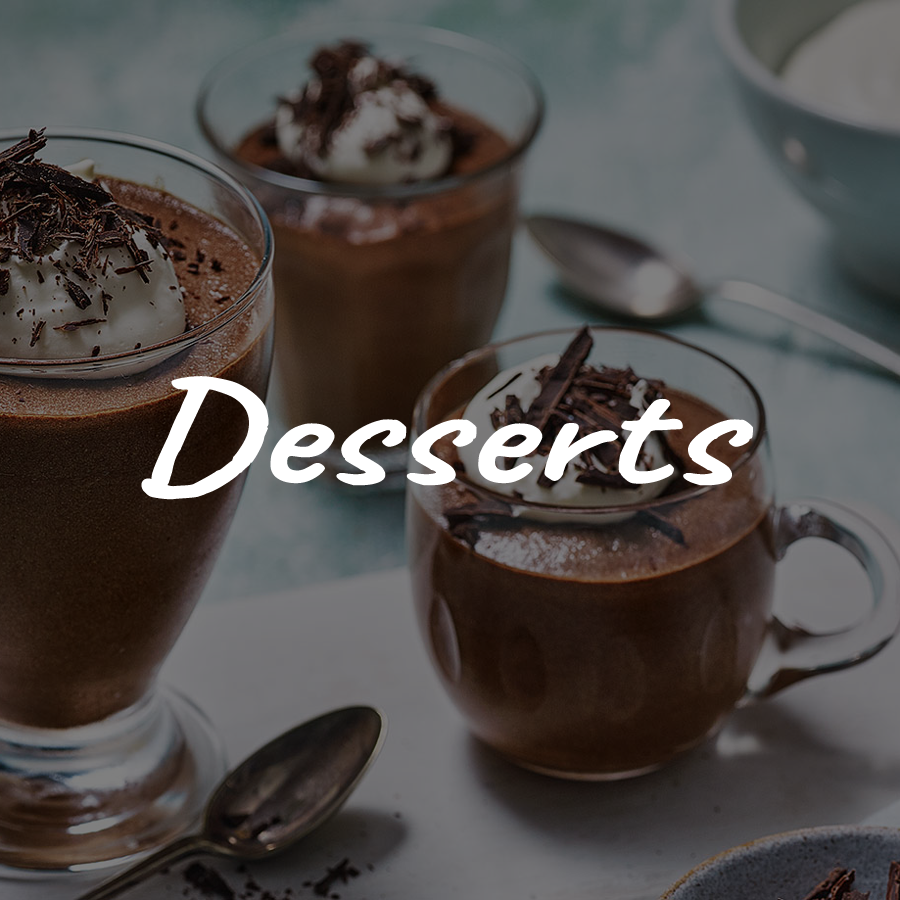
<style>
.page{position:relative;width:900px;height:900px}
.page>*{position:absolute;margin:0}
.t1{font:150px "Caveat-Bold";color:#ffffff;scale:1.34 1}
</style>
<div class="page">
<p class="t1" style="left:141px;top:376px;width:612px;height:124px">Desserts</p>
</div>
